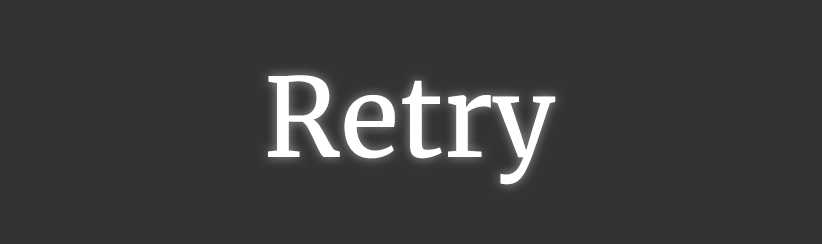
<style>
.page{position:relative;width:822px;height:244px;background:#333333}
.page>*{position:absolute;margin:0}
.t1{font:108.7px "Merriweather-Regular";color:#ffffff}
</style>
<div class="page">
<p class="t1" style="left:268px;top:75px;width:288px;height:110px">Retry</p>
</div>
